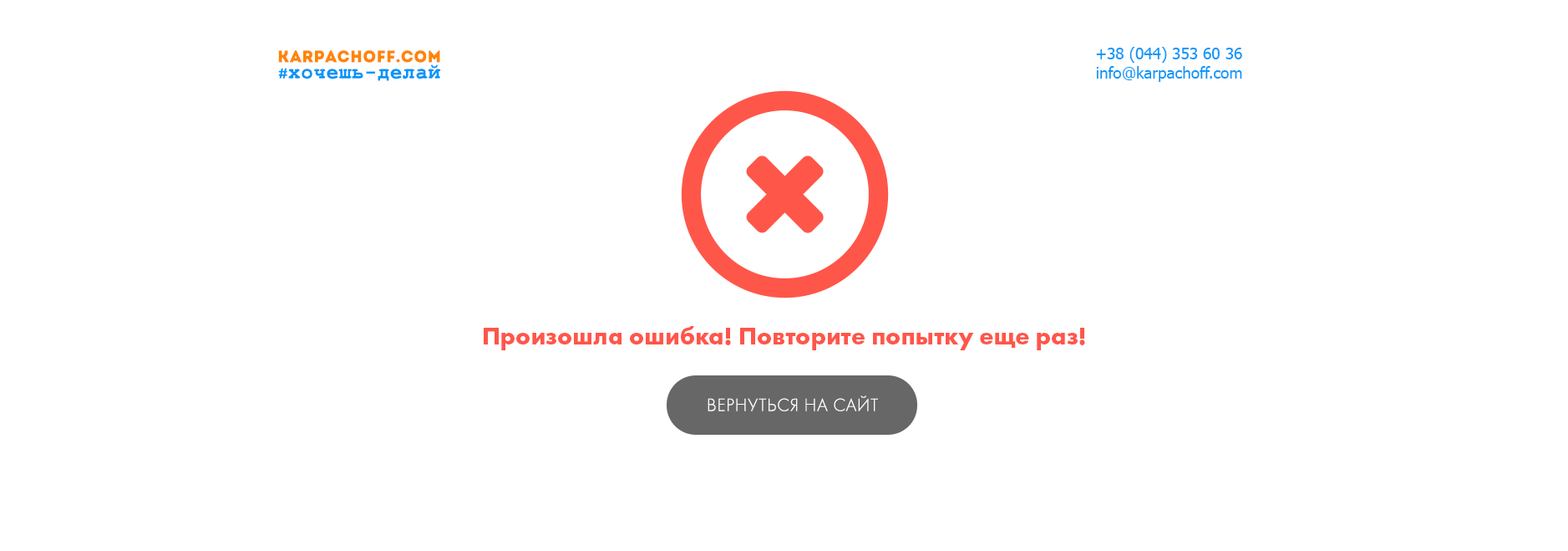
<style>
.page{position:relative;width:1568px;height:551px;background:#ffffff}
.page>*{position:absolute;margin:0}
.t1{font:16.3px "Intro";letter-spacing:0.03em;color:#ff8400}
.t2{font:15.9px "Tahoma";color:#0c98f9}
.t3{font:20.6px "CourierNewPS-BoldMT";letter-spacing:0.03em;color:#0295f9}
.t4{font:14.3px "Ubuntu-Medium";letter-spacing:0.03em;color:#0295f9}
.t5{font:25.1px "FuturaPT-Bold";color:#ff564a}
.t6{font:18.4px "FuturaPT-Light";letter-spacing:0.03em;color:#ffffff;text-transform:uppercase}
</style>
<div class="page">
<p class="t1" style="left:278px;top:50px;width:162px;height:13px">karpachoff.com</p>
<p class="t2" style="left:1096px;top:47px;width:146px;height:35px;text-align:right">+38 (044) 353 60 36<br>info@karpachoff.com</p>
<p class="t3" style="left:278px;top:64px;width:163px;height:17px"><span class="t4">#</span>хочешь-делай</p>
<p class="t5" style="left:484px;top:326px;width:601px;height:24px">Произошла ошибка! Повторите попытку еще раз!</p>
<p class="t6" style="left:708px;top:395px;width:170px;height:16px">Вернуться на сайт</p>
</div>
